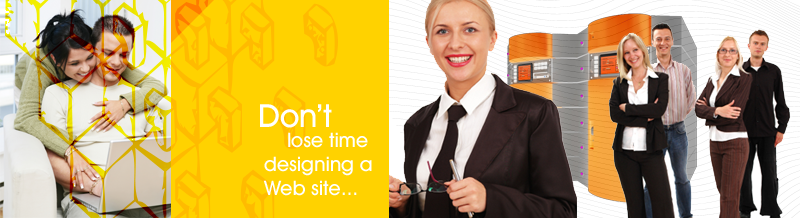
<style>
.page{position:relative;width:800px;height:218px;background:#ffd200}
.page>*{position:absolute;margin:0}
.t1{font:32px "AvantGardeITCbyBT-Medium";color:#ffffff}
.t2{font:20px "AvantGardeITCbyBT-Medium";color:#ffffff}
</style>
<div class="page">
<p class="t1" style="left:260px;top:104px;width:72px;height:24px">Don’t</p>
<p class="t2" style="left:263px;top:132px;width:109px;height:64px">lose time<br>designing a<br>Web site...</p>
</div>
